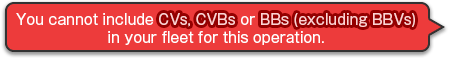
<style>
.page{position:relative;width:450px;height:58px;background:#ed3b3b}
.page>*{position:absolute;margin:0}
.t1{font:14px/18px "GothicMB101Pro-Regular";color:#ffffff}
.t2{font:14px/18px "GothicMB101Pro-Regular";color:#ffd3d3}
</style>
<div class="page">
<p class="t1" style="left:16px;top:13px;width:399px;height:32px;text-align:center">You cannot include <span class="t2">CVs, CVBs</span> or <span class="t2">BBs (excluding BBVs)<br></span>in your fleet for this operation.</p>
<p class="t1" style="left:16px;top:13px;width:399px;height:32px;text-align:center">You cannot include <span class="t2">CVs, CVBs</span> or <span class="t2">BBs (excluding BBVs)<br></span>in your fleet for this operation.</p>
</div>
